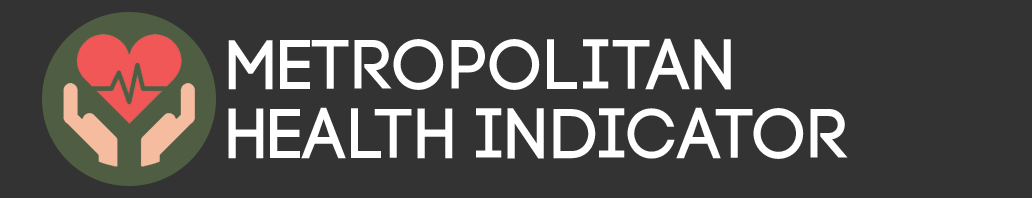
<style>
.page{position:relative;width:1032px;height:198px;background:#333333}
.page>*{position:absolute;margin:0}
.t1{font:70px "Code-Pro-Demo";color:#ffffff}
</style>
<div class="page">
<p class="t1" style="left:228px;top:38px;width:503px;height:52px">metropolitan</p>
<p class="t1" style="left:228px;top:107px;width:620px;height:52px">Health indicator</p>
</div>
